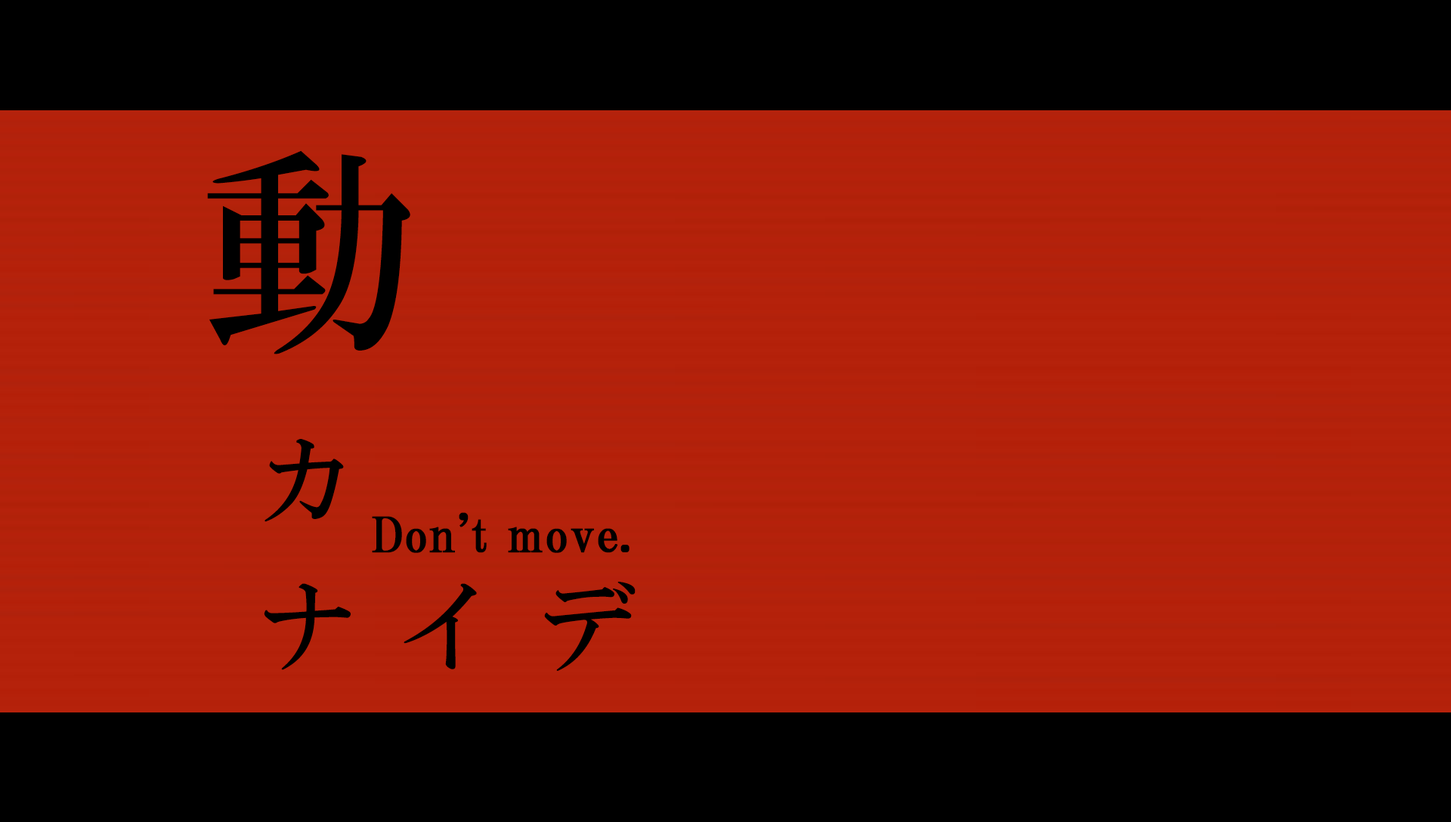
<style>
.page{position:relative;width:1451px;height:822px;background:#000000}
.page>*{position:absolute;margin:0}
.t1{font:216.8px "HGMinchoB";letter-spacing:0.43em;color:#000000}
.t2{font:98.2px/145.1px "HGMinchoB";letter-spacing:0.43em;color:#000000}
.t3{font:48.4px "HGPMinchoB";letter-spacing:0.01em;color:#000000;font-weight:bold}
</style>
<div class="page">
<p class="t1" style="left:207px;top:150px;width:203px;height:204px">動</p>
<p class="t2" style="left:264px;top:439px;width:371px;height:232px">カ<br>ナイデ</p>
<p class="t3" style="left:372px;top:512px;width:257px;height:41px">Don't move.</p>
</div>
